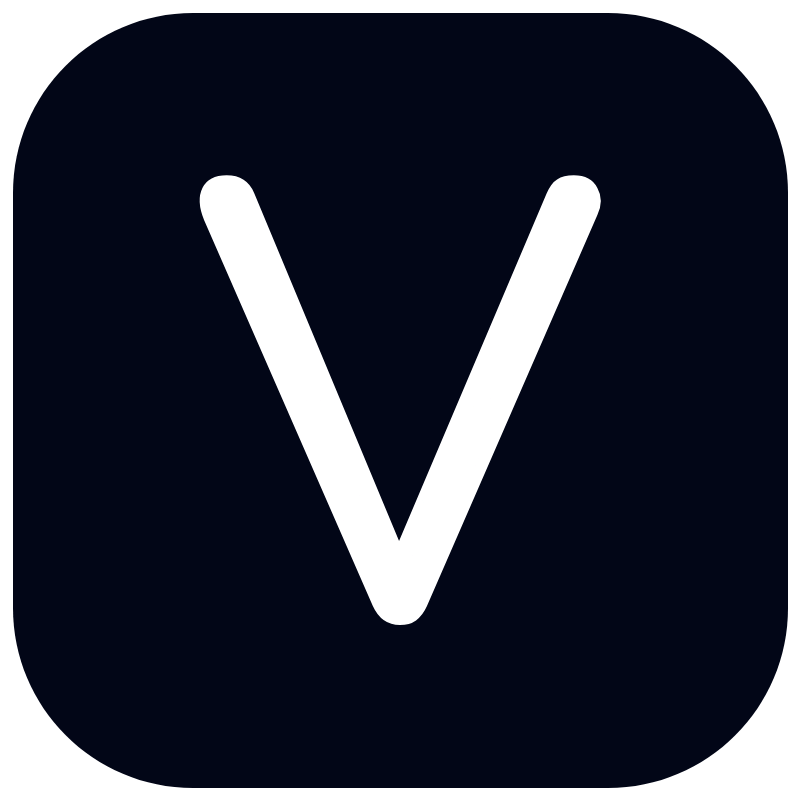
<style>
.page{position:relative;width:800px;height:800px;background:#020617}
.page>*{position:absolute;margin:0}
.t1{font:575.7px "Comfortaa-Bold";color:#ffffff}
</style>
<div class="page">
<p class="t1" style="left:199px;top:175px;width:402px;height:450px">V</p>
</div>
